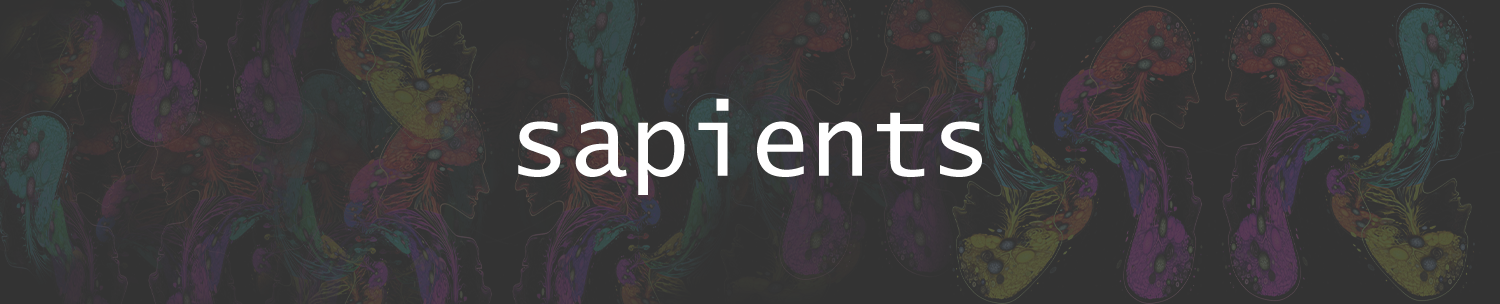
<style>
.page{position:relative;width:1500px;height:304px;background:#333333}
.page>*{position:absolute;margin:0}
.t1{font:100px "LucidaSans-Typewriter";color:#ffffff}
</style>
<div class="page">
<p class="t1" style="left:518px;top:98px;width:464px;height:97px">sapients</p>
</div>
